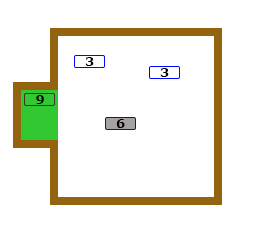
<style>
.page{position:relative;width:275px;height:240px;background:#ffffff}
.page>*{position:absolute;margin:0}
.t1{font:13px "Verdana-Bold";color:#000000}
</style>
<div class="page">
<p class="t1" style="left:85px;top:57px;width:9px;height:9px">3</p>
<p class="t1" style="left:160px;top:68px;width:9px;height:9px">3</p>
<p class="t1" style="left:36px;top:95px;width:8px;height:9px">9</p>
<p class="t1" style="left:116px;top:119px;width:9px;height:9px">6</p>
</div>
